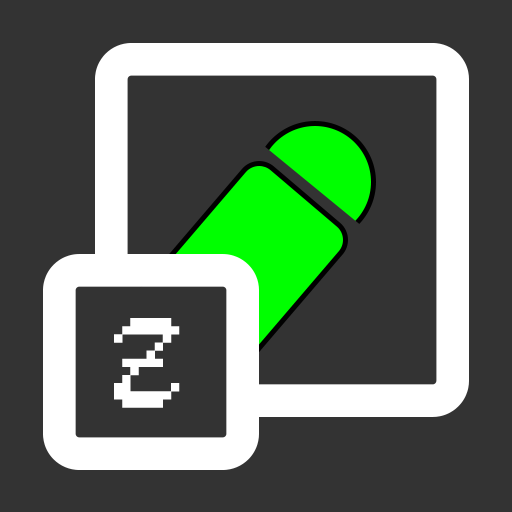
<style>
.page{position:relative;width:512px;height:512px;background:#333333}
.page>*{position:absolute;margin:0}
.t1{font:130px "Alagard";color:#ffffff}
</style>
<div class="page">
<p class="t1" style="left:114px;top:318px;width:66px;height:90px">Z</p>
</div>
